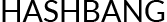
<style>
.page{position:relative;width:167px;height:22px;background:#ffffff}
.page>*{position:absolute;margin:0}
.t1{font:30px "Lato-Regular";color:#000000}
</style>
<div class="page">
<p class="t1" style="left:2px;top:0px;width:163px;height:22px">HASHBANG</p>
</div>
